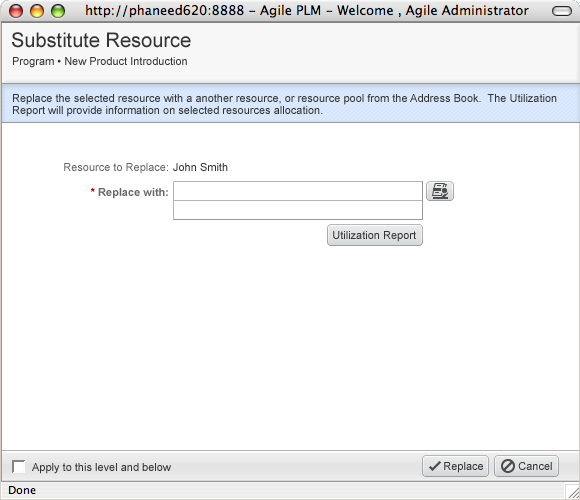
<style>
.page{position:relative;width:580px;height:500px;background:#ffffff}
.page>*{position:absolute;margin:0}
.t1{font:20px "ArialMT";color:#333333}
.t2{font:11px "ArialMT";color:#333333}
.t3{font:11px/12px "ArialMT";color:#333333}
.t4{font:11px "ArialMT";color:#666666}
.t5{font:11px "Arial-BoldMT";color:#666666}
.t6{font:11px "Arial-BoldMT";color:#990000}
</style>
<div class="page">
<p class="t1" style="left:12px;top:32px;width:179px;height:16px">Substitute Resource</p>
<p class="t2" style="left:13px;top:57px;width:174px;height:11px">Program • New Product Introduction</p>
<p class="t3" style="left:13px;top:94px;width:544px;height:23px">Replace the selected resource with a another resource, or resource pool from the Address Book.  The Utilization<br>Report will provide information on selected resources allocation.</p>
<p class="t4" style="left:64px;top:163px;width:104px;height:11px">Resource to Replace:</p>
<p class="t2" style="left:173px;top:163px;width:55px;height:8px">John Smith</p>
<p class="t5" style="left:90px;top:188px;width:78px;height:11px"><span class="t6">*</span> Replace with:</p>
<p class="t2" style="left:333px;top:231px;width:83px;height:11px">Utilization Report</p>
<p class="t2" style="left:444px;top:462px;width:39px;height:11px">Replace</p>
<p class="t2" style="left:518px;top:462px;width:34px;height:8px">Cancel</p>
<p class="t2" style="left:32px;top:463px;width:139px;height:11px">Apply to this level and below</p>
</div>
